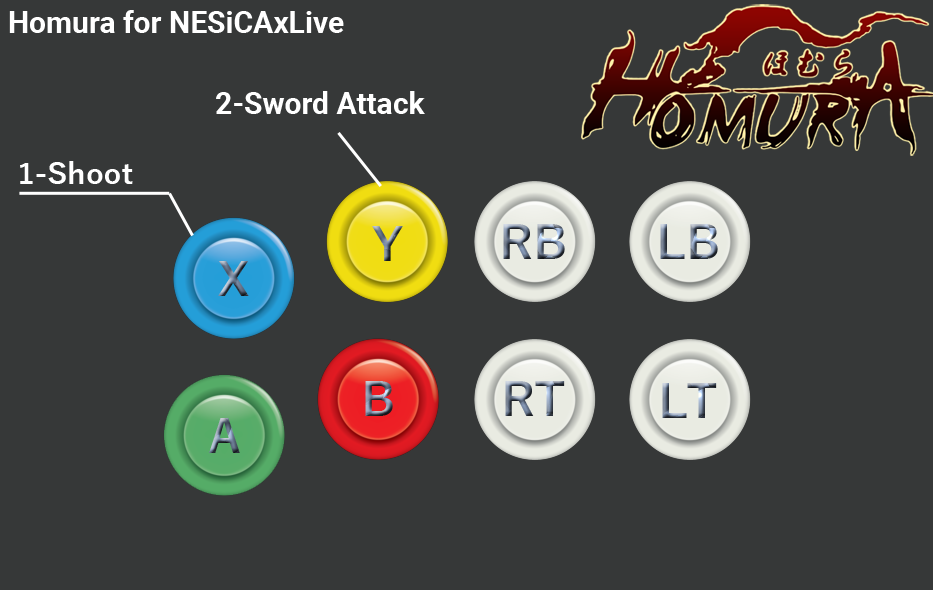
<style>
.page{position:relative;width:933px;height:590px;background:#363838}
.page>*{position:absolute;margin:0}
.t1{font:30px "Roboto-Bold";color:#ffffff}
.t2{font:30px "YuGothic-Bold";color:#ffffff}
</style>
<div class="page">
<p class="t1" style="left:9px;top:10px;width:335px;height:23px">Homura for NESiCAxLive</p>
<p class="t1" style="left:216px;top:91px;width:209px;height:23px">2-Sword Attack</p>
<p class="t2" style="left:20px;top:161px;width:113px;height:23px">1-Shoot</p>
</div>
